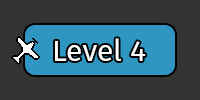
<style>
.page{position:relative;width:200px;height:100px;background:#333333}
.page>*{position:absolute;margin:0}
.t1{font:30px "FiraSans-Regular";color:#ffffff}
</style>
<div class="page">
<p class="t1" style="left:55px;top:38px;width:91px;height:23px">Level 4</p>
</div>
